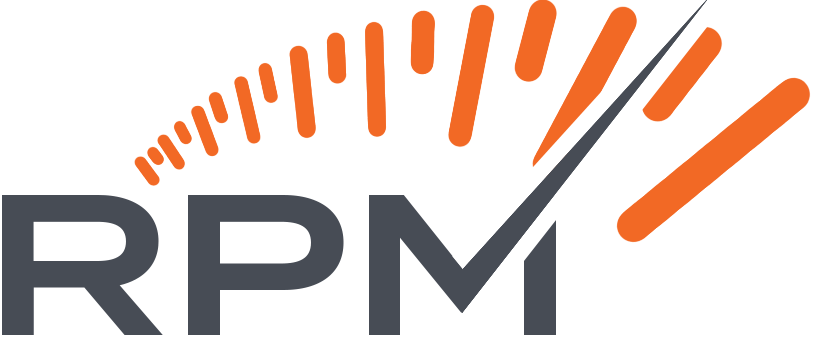
<style>
.page{position:relative;width:817px;height:338px;background:#ffffff}
.page>*{position:absolute;margin:0}
.t1{font:200px "Termina-Demi";color:#474c55}
</style>
<div class="page">
<p class="t1" style="left:2px;top:195px;width:554px;height:140px">RPM</p>
</div>
